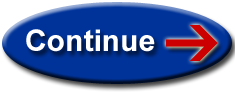
<style>
.page{position:relative;width:235px;height:93px;background:#003399}
.page>*{position:absolute;margin:0}
.t1{font:30px "Arial-BoldMT";color:#ffffff}
</style>
<div class="page">
<p class="t1" style="left:26px;top:29px;width:129px;height:23px">Continue</p>
</div>
